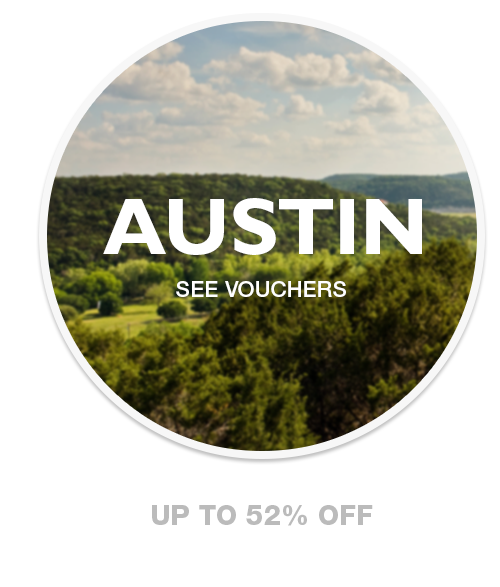
<style>
.page{position:relative;width:500px;height:587px;background:#ffffff}
.page>*{position:absolute;margin:0}
.t1{font:80.8px "GillSansMTPro-Bold";letter-spacing:0.005em;color:#ffffff}
.t2{font:22px "HelveticaNeueLTStd-Md";letter-spacing:0.005em;color:#ffffff}
.t3{font:27.5px "HelveticaNeueLTStd-Hv";color:#bbbbbb}
</style>
<div class="page">
<p class="t1" style="left:103px;top:198px;width:319px;height:57px">AUSTIN</p>
<p class="t2" style="left:176px;top:281px;width:170px;height:16px">SEE VOUCHERS</p>
<p class="t3" style="left:152px;top:505px;width:221px;height:21px">UP TO 52% OFF</p>
</div>
